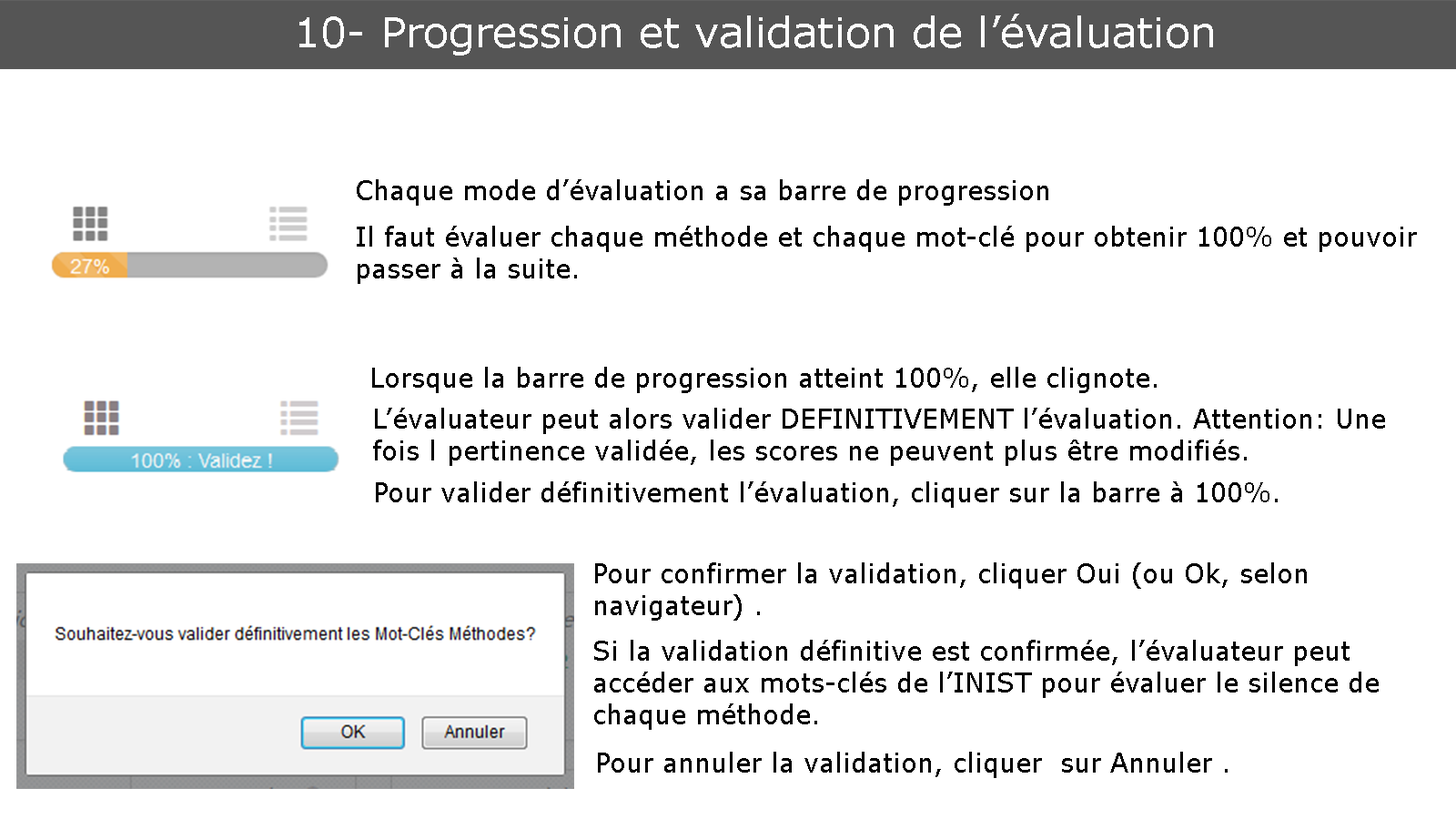
<style>
.page{position:relative;width:1456px;height:819px;background:#ffffff}
.page>*{position:absolute;margin:0}
.t1{font:41.7px "Verdana";color:#ffffff}
.t2{font:26.5px "Verdana";color:#000000}
</style>
<div class="page">
<p class="t1" style="left:299px;top:14px;width:914px;height:42px">10- Progression et validation de l’évaluation</p>
<p class="t2" style="left:357px;top:226px;width:1060px;height:58px">Il faut évaluer chaque méthode et chaque mot-clé pour obtenir 100% et pouvoir passer à la suite.</p>
<p class="t2" style="left:372px;top:367px;width:785px;height:26px">Lorsque la barre de progression atteint 100%, elle clignote.</p>
<p class="t2" style="left:373px;top:408px;width:1012px;height:58px">L’évaluateur peut alors valider DEFINITIVEMENT l’évaluation. Attention: Une fois l  pertinence validée, les scores ne peuvent plus être modifiés.</p>
<p class="t2" style="left:376px;top:481px;width:902px;height:27px">Pour valider définitivement l’évaluation, cliquer sur la barre à 100%.</p>
<p class="t2" style="left:595px;top:562px;width:712px;height:59px">Pour confirmer la validation, cliquer Oui (ou Ok, selon navigateur) .</p>
<p class="t2" style="left:594px;top:640px;width:785px;height:90px">Si la validation définitive est confirmée, l’évaluateur peut accéder aux mots-clés de l’INIST pour évaluer le silence de chaque méthode.</p>
<p class="t2" style="left:598px;top:752px;width:630px;height:26px">Pour annuler la validation, cliquer  sur Annuler .</p>
</div>
